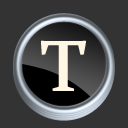
<style>
.page{position:relative;width:128px;height:128px;background:#333333}
.page>*{position:absolute;margin:0}
.t1{font:72px "Constantia";color:#fff6e3;font-weight:bold}
</style>
<div class="page">
<p class="t1" style="left:41px;top:40px;width:45px;height:51px">T</p>
</div>
